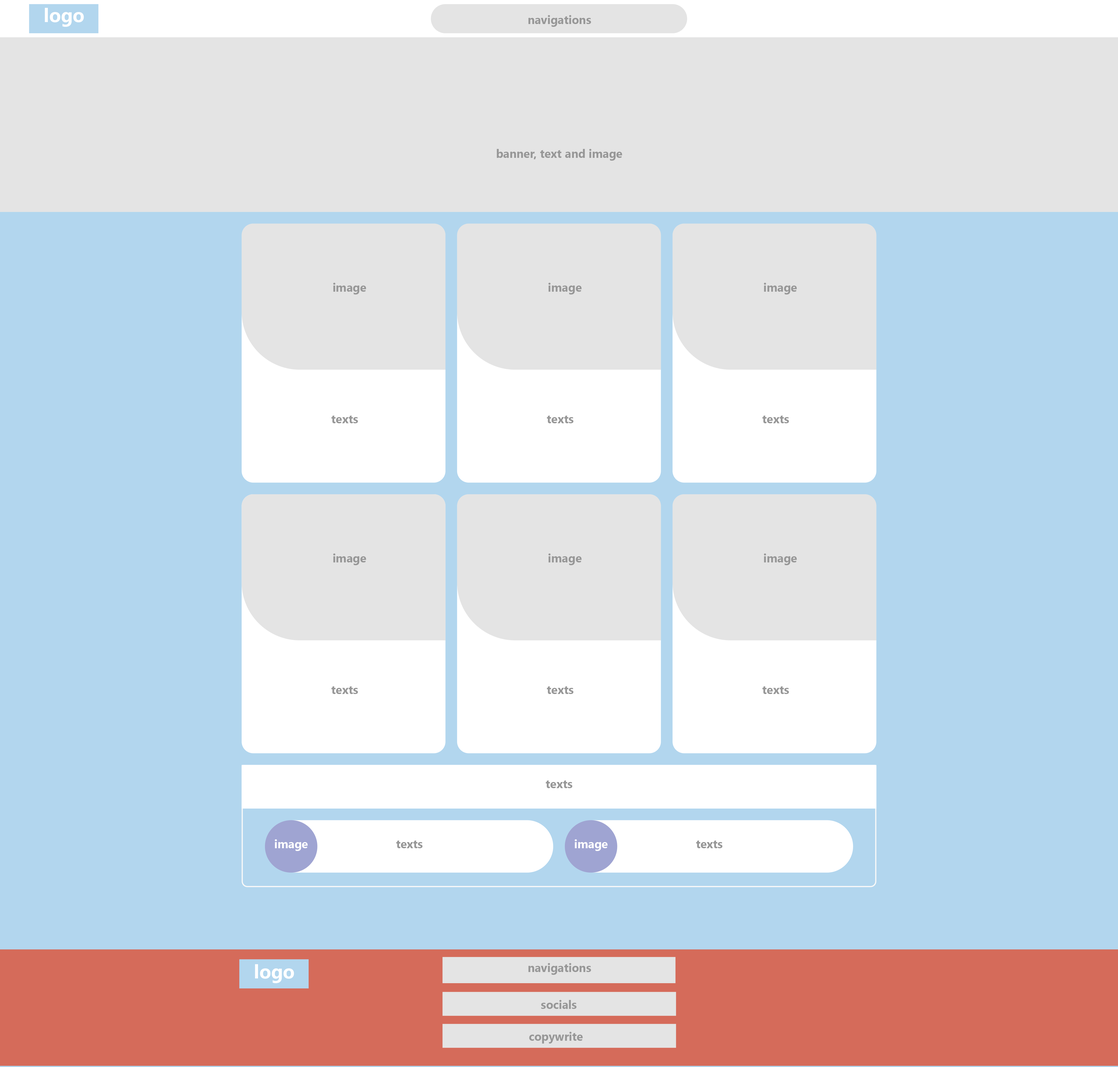
<style>
.page{position:relative;width:1118px;height:1067px;background:#b2d6ee}
.page>*{position:absolute;margin:0}
.t1{font:19.2px "SegoeUI-Bold";color:#ffffff}
.t2{font:11.6px "SegoeUI-Bold";color:#979797}
.t3{font:11.6px "SegoeUI-Bold";color:#ffffff}
</style>
<div class="page">
<p class="t1" style="left:45px;top:8px;width:39px;height:19px">logo</p>
<p class="t2" style="left:528px;top:15px;width:63px;height:12px">navigations</p>
<p class="t2" style="left:496px;top:149px;width:126px;height:12px">banner, text and image</p>
<p class="t2" style="left:333px;top:283px;width:33px;height:11px">image</p>
<p class="t2" style="left:548px;top:283px;width:33px;height:11px">image</p>
<p class="t2" style="left:764px;top:283px;width:33px;height:11px">image</p>
<p class="t2" style="left:331px;top:415px;width:27px;height:8px">texts</p>
<p class="t2" style="left:546px;top:415px;width:27px;height:8px">texts</p>
<p class="t2" style="left:762px;top:415px;width:27px;height:8px">texts</p>
<p class="t2" style="left:333px;top:553px;width:33px;height:12px">image</p>
<p class="t2" style="left:548px;top:553px;width:33px;height:12px">image</p>
<p class="t2" style="left:764px;top:553px;width:33px;height:12px">image</p>
<p class="t2" style="left:331px;top:686px;width:27px;height:8px">texts</p>
<p class="t2" style="left:546px;top:686px;width:27px;height:8px">texts</p>
<p class="t2" style="left:762px;top:686px;width:27px;height:8px">texts</p>
<p class="t2" style="left:545px;top:780px;width:27px;height:8px">texts</p>
<p class="t3" style="left:275px;top:839px;width:33px;height:12px">image</p>
<p class="t2" style="left:396px;top:840px;width:26px;height:8px">texts</p>
<p class="t3" style="left:574px;top:839px;width:33px;height:12px">image</p>
<p class="t2" style="left:696px;top:840px;width:26px;height:8px">texts</p>
<p class="t1" style="left:255px;top:964px;width:39px;height:19px">logo</p>
<p class="t2" style="left:528px;top:963px;width:63px;height:12px">navigations</p>
<p class="t2" style="left:541px;top:1000px;width:35px;height:9px">socials</p>
<p class="t2" style="left:529px;top:1032px;width:54px;height:12px">copywrite</p>
</div>
